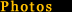
<style>
.page{position:relative;width:72px;height:12px;background:#000000}
.page>*{position:absolute;margin:0}
.t1{font:14px "Georgia";letter-spacing:0.1em;color:#ffc000;font-weight:bold}
</style>
<div class="page">
<p class="t1" style="left:0px;top:0px;width:52px;height:12px">Photos</p>
</div>
